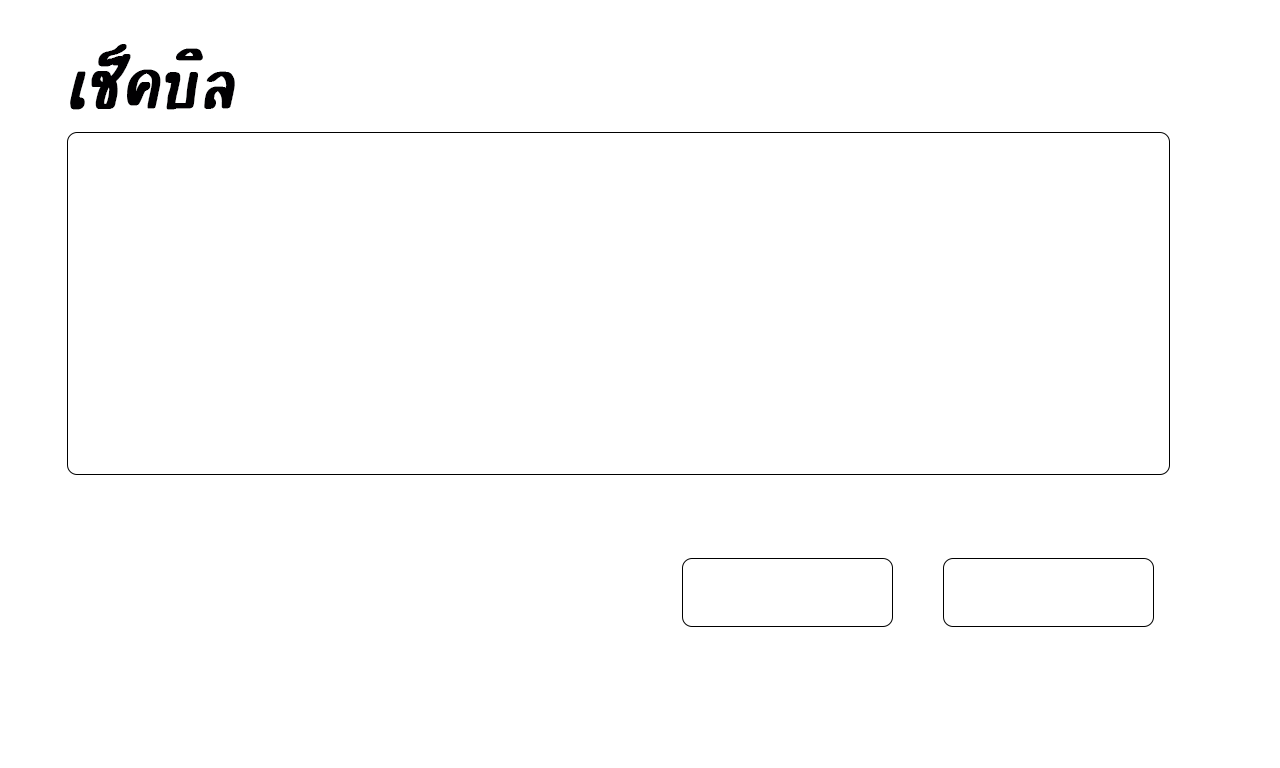
<style>
.page{position:relative;width:1280px;height:768px;background:#ffffff}
.page>*{position:absolute;margin:0}
.t1{font:93.8px "FCMarshmallowBrushItalic";color:#010002;font-weight:bold}
</style>
<div class="page">
<p class="t1" style="left:70px;top:44px;width:165px;height:66px">เช็คบิล</p>
</div>
